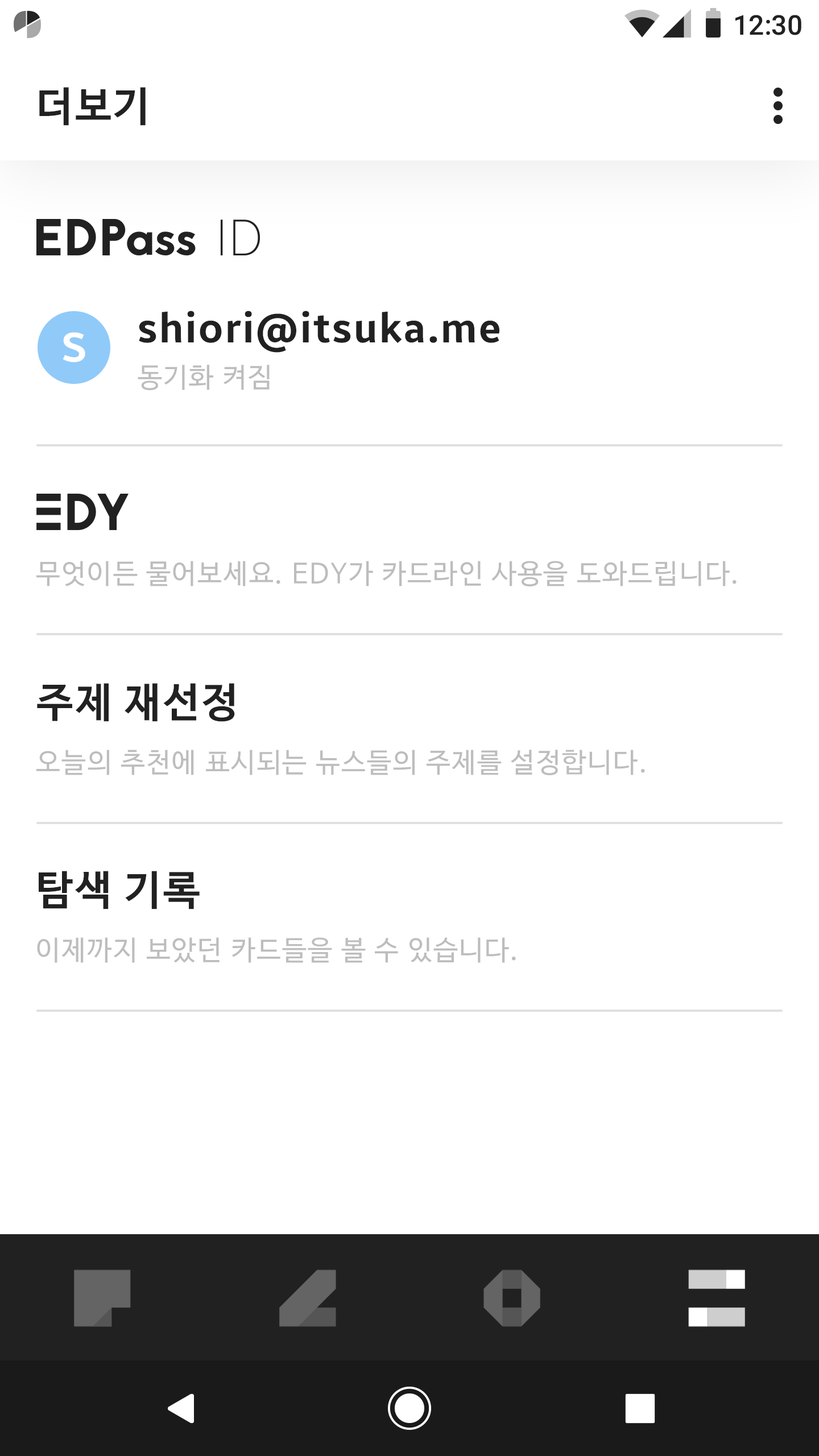
<style>
.page{position:relative;width:819px;height:1456px;background:#ffffff}
.page>*{position:absolute;margin:0}
.t1{font:27.3px "Roboto-Medium";color:#212121}
.t2{font:40.9px "NanumBarunGothicBold";letter-spacing:0.05em;color:#212121}
.t3{font:40.9px "BreezeSans-Bold";letter-spacing:0.05em;color:#212121}
.t4{font:40.9px "BreezeSans-Bold";letter-spacing:0.05em;color:#ffffff}
.t5{font:27.3px "NanumBarunGothic";letter-spacing:0.05em;color:#bdbdbd}
</style>
<div class="page">
<p class="t1" style="left:735px;top:15px;width:66px;height:20px">12:30</p>
<p class="t2" style="left:39px;top:87px;width:107px;height:39px">더보기</p>
<p class="t3" style="left:139px;top:311px;width:360px;height:42px">shiori@itsuka.me</p>
<p class="t4" style="left:63px;top:332px;width:22px;height:30px">S</p>
<p class="t5" style="left:138px;top:365px;width:132px;height:25px">동기화 켜짐</p>
<p class="t5" style="left:36px;top:561px;width:701px;height:25px">무엇이든 물어보세요. EDY가 카드라인 사용을 도와드립니다.</p>
<p class="t2" style="left:37px;top:683px;width:198px;height:39px">주제 재선정</p>
<p class="t5" style="left:36px;top:750px;width:609px;height:25px">오늘의 추천에 표시되는 뉴스들의 주제를 설정합니다.</p>
<p class="t2" style="left:39px;top:871px;width:161px;height:38px">탐색 기록</p>
<p class="t5" style="left:37px;top:937px;width:479px;height:26px">이제까지 보았던 카드들을 볼 수 있습니다.</p>
</div>
